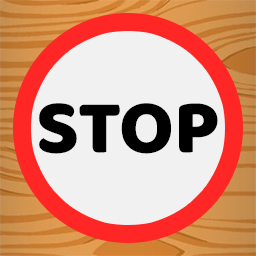
<style>
.page{position:relative;width:256px;height:256px;background:#f1f1f1}
.page>*{position:absolute;margin:0}
.t1{font:78px "Baloo2-ExtraBold";color:#000000}
</style>
<div class="page">
<p class="t1" style="left:39px;top:103px;width:179px;height:51px">STOP</p>
</div>
